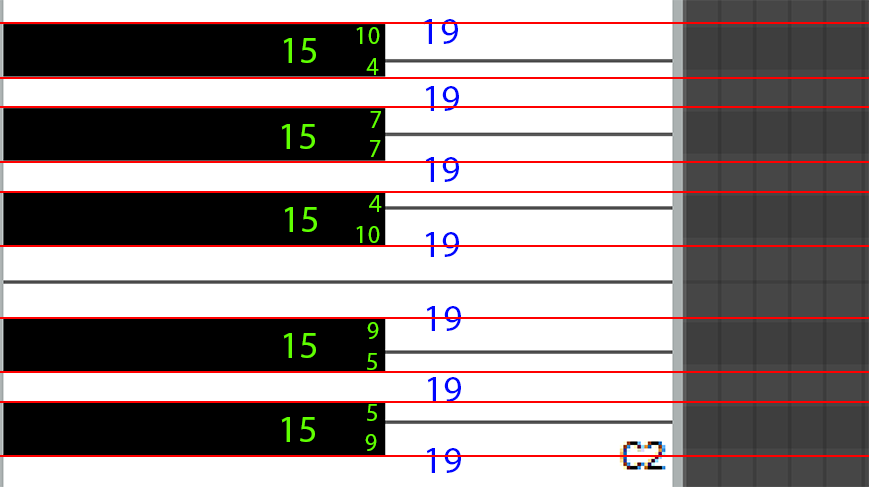
<style>
.page{position:relative;width:869px;height:487px;background:#ffffff}
.page>*{position:absolute;margin:0}
.t1{font:25px "MyriadPro-Regular";color:#60ff00}
.t2{font:37.5px "MyriadPro-Regular";color:#0006ff}
.t3{font:37.5px "MyriadPro-Regular";color:#60ff00}
</style>
<div class="page">
<p class="t1" style="left:356px;top:27px;width:24px;height:17px">10</p>
<p class="t2" style="left:423px;top:19px;width:35px;height:25px">19</p>
<p class="t3" style="left:283px;top:38px;width:33px;height:25px">15</p>
<p class="t1" style="left:366px;top:58px;width:13px;height:17px">4</p>
<p class="t2" style="left:425px;top:86px;width:34px;height:25px">19</p>
<p class="t1" style="left:370px;top:111px;width:11px;height:17px">7</p>
<p class="t3" style="left:281px;top:124px;width:34px;height:25px">15</p>
<p class="t1" style="left:370px;top:140px;width:11px;height:17px">7</p>
<p class="t2" style="left:425px;top:157px;width:34px;height:25px">19</p>
<p class="t1" style="left:369px;top:195px;width:13px;height:17px">4</p>
<p class="t3" style="left:284px;top:207px;width:33px;height:25px">15</p>
<p class="t1" style="left:356px;top:226px;width:24px;height:17px">10</p>
<p class="t2" style="left:425px;top:232px;width:34px;height:25px">19</p>
<p class="t2" style="left:426px;top:306px;width:35px;height:25px">19</p>
<p class="t1" style="left:367px;top:322px;width:12px;height:17px">9</p>
<p class="t3" style="left:283px;top:333px;width:33px;height:25px">15</p>
<p class="t1" style="left:367px;top:353px;width:10px;height:17px">5</p>
<p class="t2" style="left:427px;top:377px;width:34px;height:25px">19</p>
<p class="t1" style="left:367px;top:404px;width:10px;height:17px">5</p>
<p class="t3" style="left:281px;top:417px;width:34px;height:25px">15</p>
<p class="t1" style="left:365px;top:434px;width:12px;height:17px">9</p>
<p class="t2" style="left:426px;top:448px;width:35px;height:25px">19</p>
</div>
